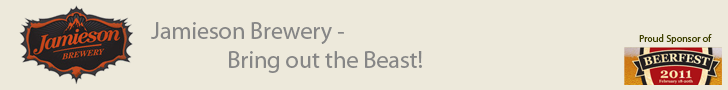
<style>
.page{position:relative;width:728px;height:90px;background:#ede9db}
.page>*{position:absolute;margin:0}
.t1{font:24px "MyriadPro-Regular";color:#868686}
.t2{font:10px "MyriadPro-Regular";color:#3e4000}
</style>
<div class="page">
<p class="t1" style="left:151px;top:22px;width:271px;height:51px">Jamieson Brewery -<br>               Bring out the Beast!</p>
<p class="t2" style="left:639px;top:34px;width:73px;height:10px">Proud Sponsor of</p>
</div>
